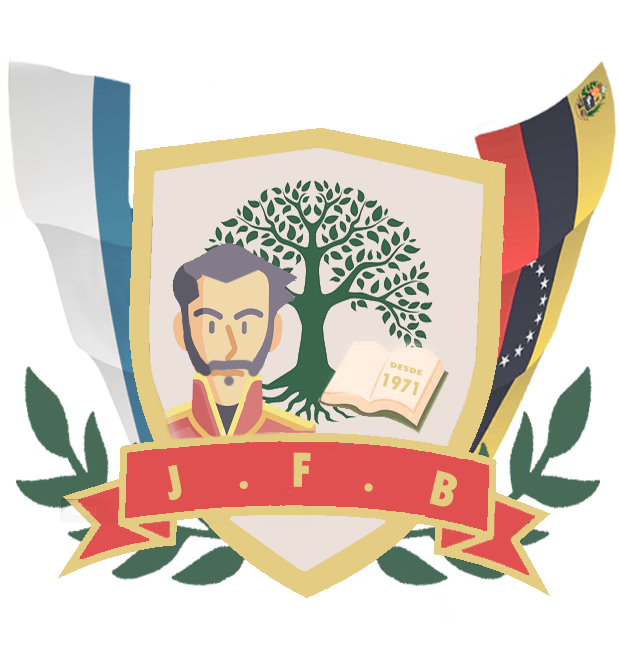
<style>
.page{position:relative;width:619px;height:645px;background:#ffffff}
.page>*{position:absolute;margin:0}
.t1{font:8.1px "TwCenMT-CondensedExtraBold";color:#e4cc83;scale:1.79 1}
.t2{font:20.3px "TwCenMT-CondensedExtraBold";color:#e4cc83;scale:1.03 1}
.t3{font:51.8px "TwCenMT-CondensedExtraBold";color:#e4cc83}
</style>
<div class="page">
<p class="t1" style="left:390px;top:361px;width:33px;height:15px;rotate:16deg">DESDE</p>
<p class="t2" style="left:382px;top:372px;width:38px;height:24px;rotate:16deg">1971</p>
<p class="t3" style="left:168px;top:452px;width:289px;height:55px;rotate:2deg">J    .   F    .    B</p>
</div>
